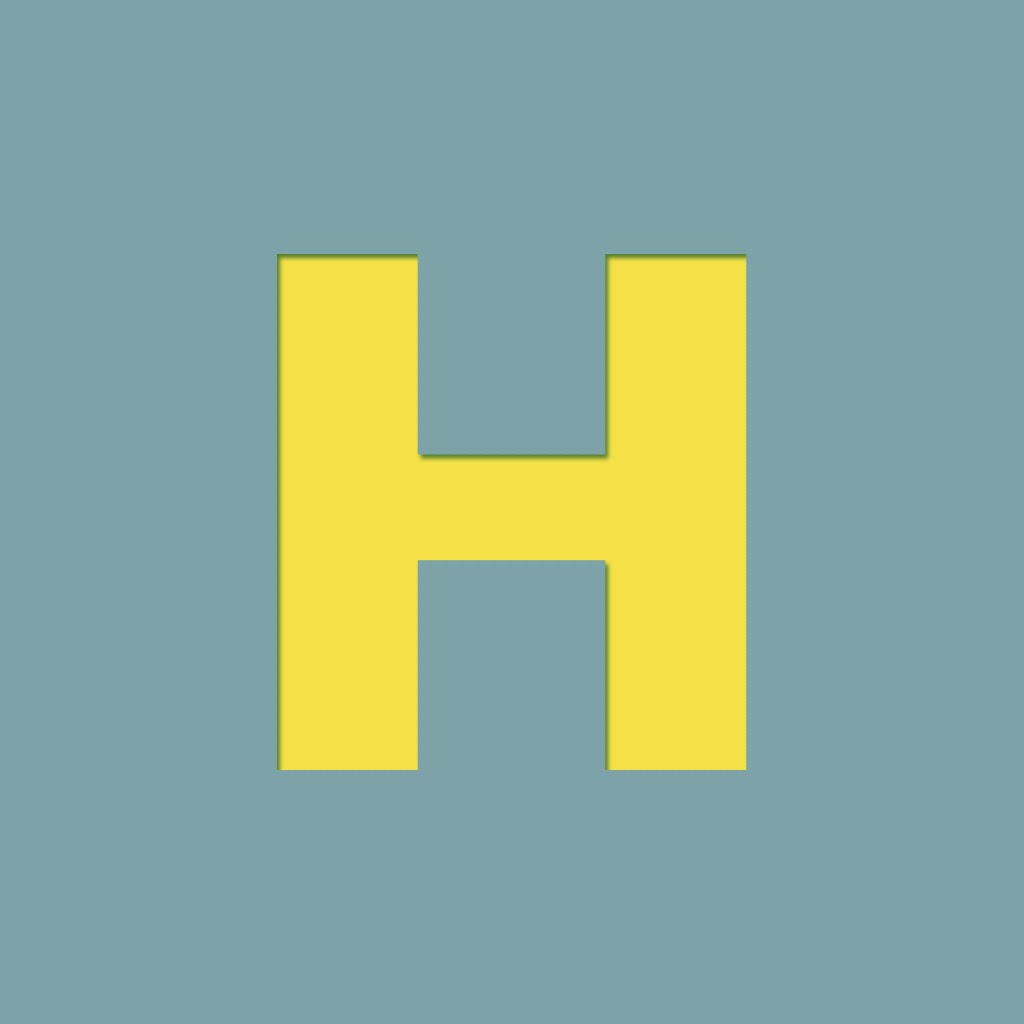
<style>
.page{position:relative;width:1024px;height:1024px;background:#7ea5aa}
.page>*{position:absolute;margin:0}
.t1{font:722px "FuturaBT-Bold";letter-spacing:0.05em;color:#f4e047}
</style>
<div class="page">
<p class="t1" style="left:277px;top:254px;width:470px;height:516px">H</p>
</div>
